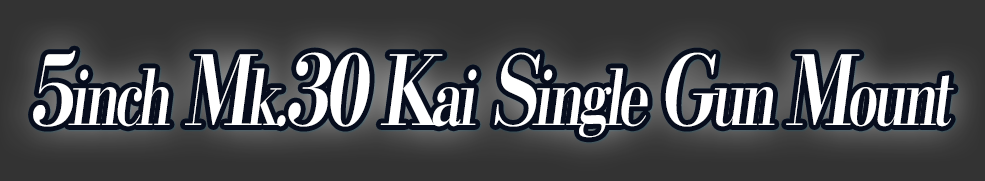
<style>
.page{position:relative;width:985px;height:181px;background:#333333}
.page>*{position:absolute;margin:0}
.t1{font:76.8px "KochoStd-Heavy";letter-spacing:-0.08em;color:#ffffff;font-style:italic;scale:0.73 1}
.t2{font:96px "KochoStd-Heavy";letter-spacing:-0.08em;color:#ffffff;font-style:italic;scale:0.73 1}
</style>
<div class="page">
<p class="t1" style="left:33px;top:50px;width:921px;height:88px"><span class="t2">5</span>inch<span class="t2"> M</span>k.<span class="t2">30 K</span>ai<span class="t2"> S</span>ingle <span class="t2">G</span>un <span class="t2">M</span>ount</p>
</div>
